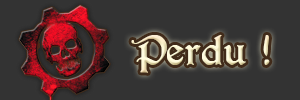
<style>
.page{position:relative;width:300px;height:100px;background:#333333}
.page>*{position:absolute;margin:0}
.t1{font:30.1px "PerryGothic"}
</style>
<div class="page">
<p class="t1" style="left:131px;top:34px;width:139px;height:39px">Perdu !</p>
</div>
